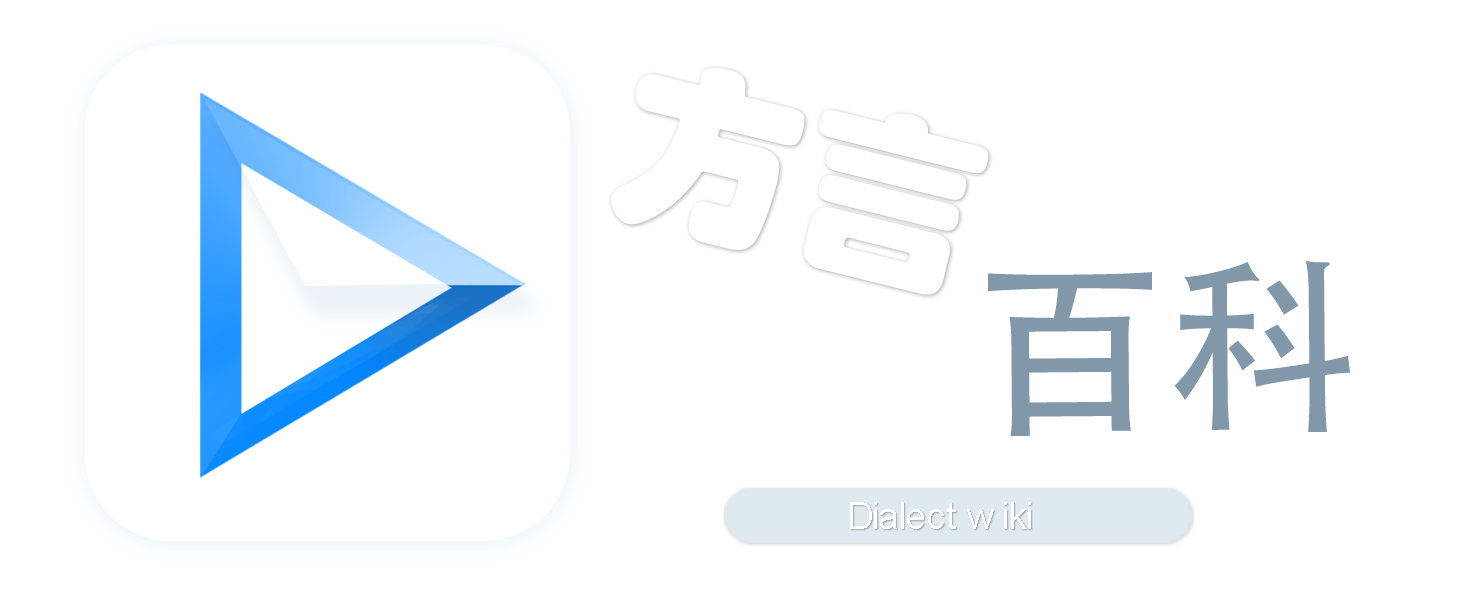
<style>
.page{position:relative;width:1478px;height:591px;background:#ffffff}
.page>*{position:absolute;margin:0}
.t1{font:192.6px "AdobeHeitiStd-Regular";color:#8198aa}
.t2{font:91.3px "Impact";color:#878787}
.t3{font:37.6px "ArialMT";color:#ffffff}
</style>
<div class="page">
<p class="t1" style="left:988px;top:261px;width:362px;height:175px"><span class="t2"><br> </span>百科</p>
<p class="t3" style="left:850px;top:502px;width:181px;height:27px">Dialect wiki</p>
</div>
